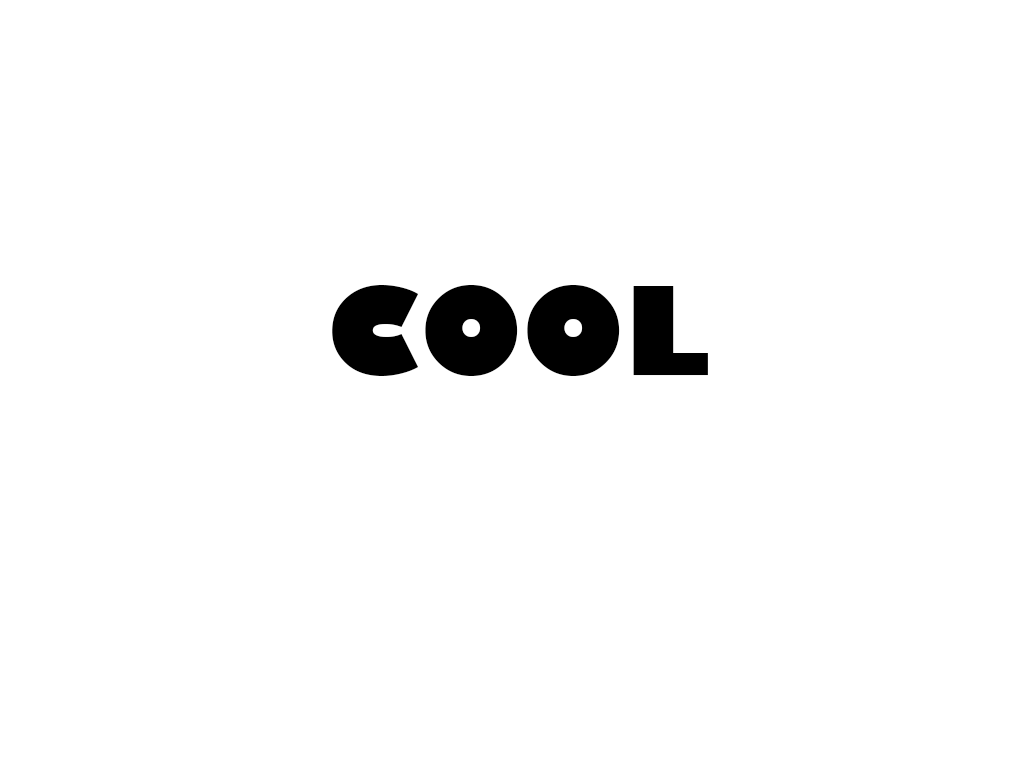
<style>
.page{position:relative;width:1024px;height:768px;background:#ffffff}
.page>*{position:absolute;margin:0}
.t1{font:120px "GillSans-UltraBold";color:#000000}
</style>
<div class="page">
<p class="t1" style="left:332px;top:285px;width:376px;height:91px">COOL</p>
</div>
